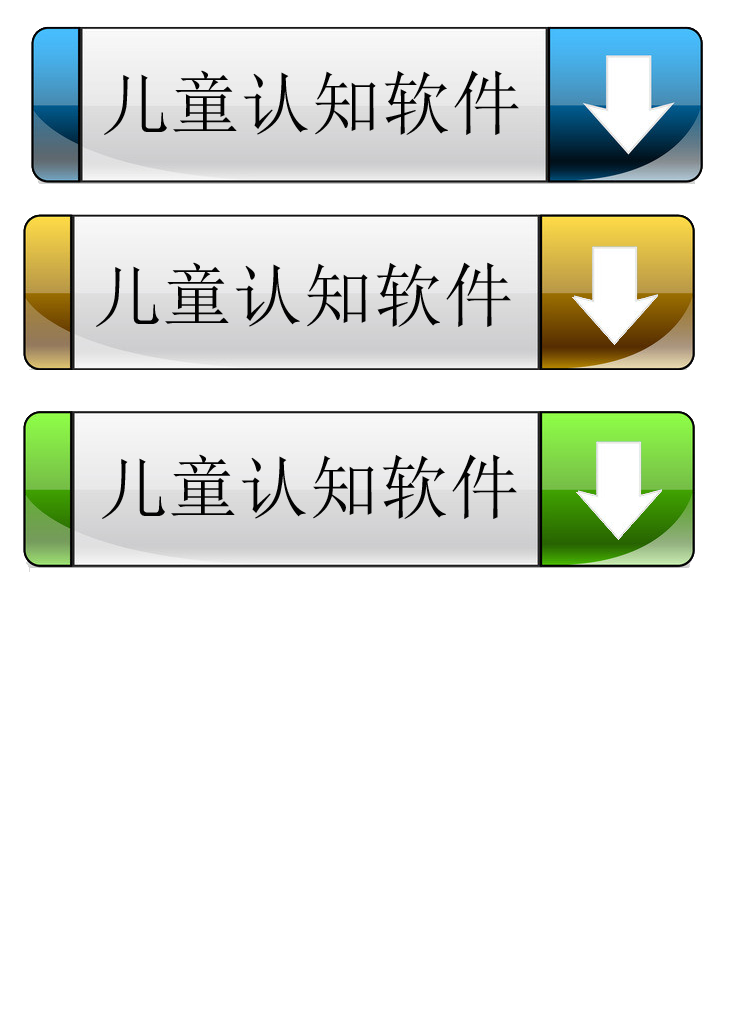
<style>
.page{position:relative;width:734px;height:1024px;background:#ffffff}
.page>*{position:absolute;margin:0}
.t1{font:70px "SimSun";letter-spacing:0.005em;color:#020202}
</style>
<div class="page">
<p class="t1" style="left:104px;top:70px;width:415px;height:65px">儿童认知软件</p>
<p class="t1" style="left:96px;top:262px;width:415px;height:65px">儿童认知软件</p>
<p class="t1" style="left:102px;top:454px;width:415px;height:65px">儿童认知软件</p>
</div>
